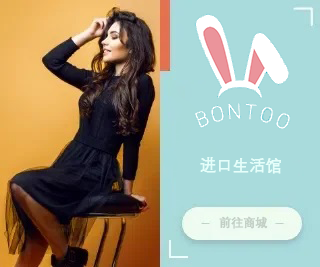
<style>
.page{position:relative;width:320px;height:267px;background:#a9dbdc}
.page>*{position:absolute;margin:0}
.t1{font:16px "DengXian";color:#e5fefa;font-weight:bold}
.t2{font:11.8px "DengXian";color:#c1cec4;font-weight:bold}
</style>
<div class="page">
<p class="t1" style="left:200px;top:157px;width:81px;height:17px">进口生活馆</p>
<p class="t2" style="left:219px;top:216px;width:49px;height:13px">前往商城</p>
</div>
